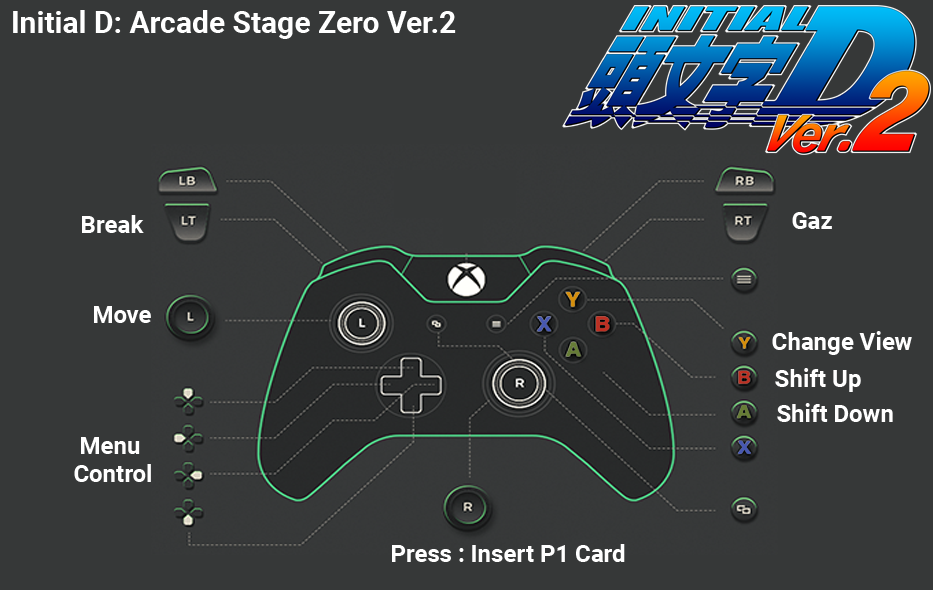
<style>
.page{position:relative;width:933px;height:590px;background:#363838}
.page>*{position:absolute;margin:0}
.t1{font:30px "Roboto-Bold";color:#ffffff}
.t2{font:24px "Roboto-Bold";color:#ffffff}
.t3{font:24px/28px "Roboto-Bold";color:#ffffff}
</style>
<div class="page">
<p class="t1" style="left:13px;top:10px;width:443px;height:29px">Initial D: Arcade Stage Zero Ver.2</p>
<p class="t2" style="left:82px;top:215px;width:62px;height:18px">Break</p>
<p class="t2" style="left:792px;top:212px;width:40px;height:17px">Gaz</p>
<p class="t2" style="left:94px;top:306px;width:57px;height:17px">Move</p>
<p class="t2" style="left:772px;top:331px;width:140px;height:24px">Change View</p>
<p class="t2" style="left:775px;top:368px;width:86px;height:24px">Shift Up</p>
<p class="t2" style="left:777px;top:403px;width:116px;height:19px">Shift Down</p>
<p class="t3" style="left:74px;top:437px;width:77px;height:45px;text-align:center">Menu <br>Control</p>
<p class="t2" style="left:392px;top:544px;width:233px;height:18px">Press : Insert P1 Card</p>
</div>
